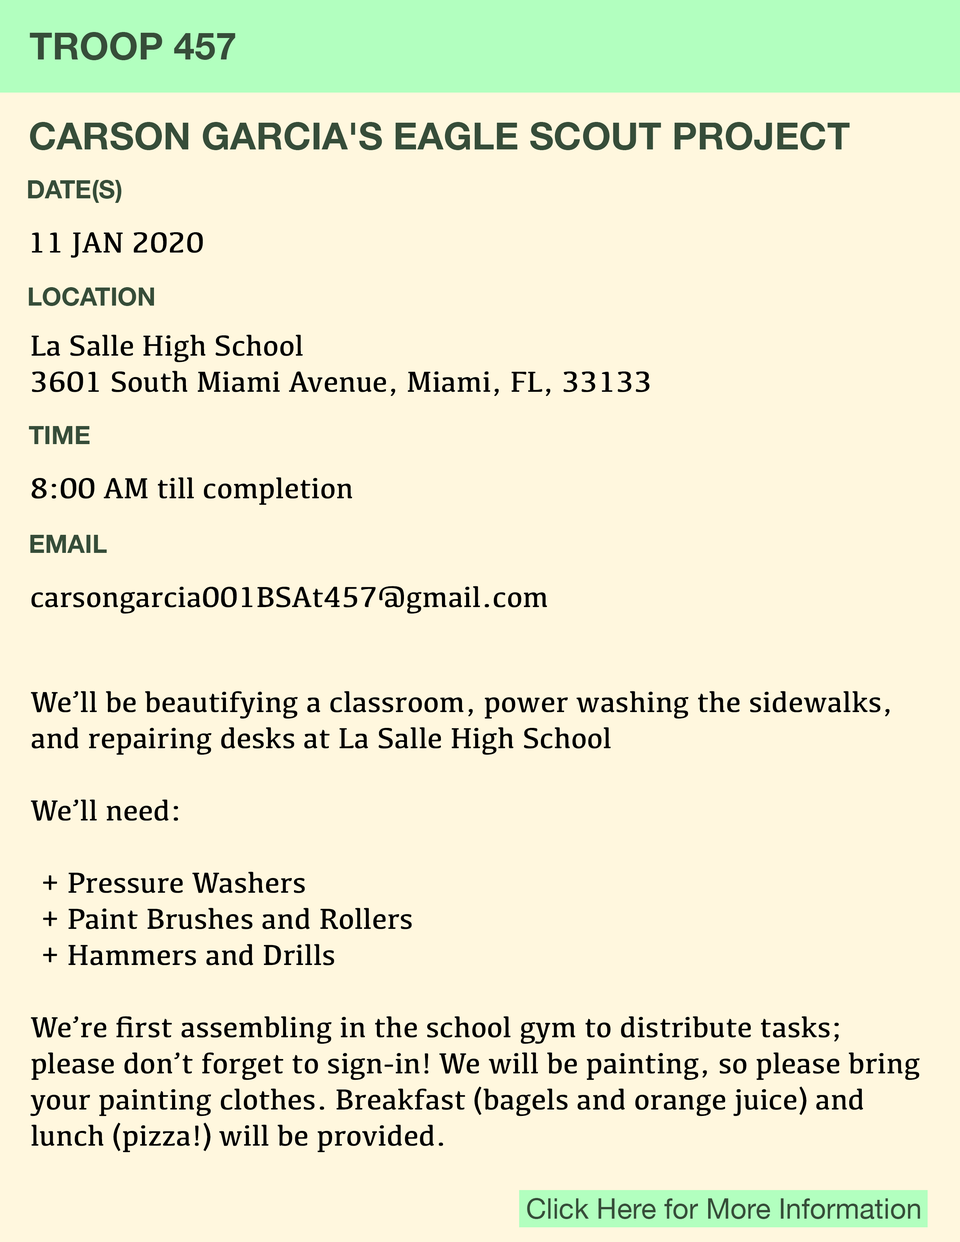
<style>
.page{position:relative;width:960px;height:1242px;background:#fff7de}
.page>*{position:absolute;margin:0}
.t1{font:37.6px "HelveticaNeue-Bold";color:#364d39}
.t2{font:25.1px "HelveticaNeue-Bold";color:#364d39}
.t3{font:30.1px "Kefa-Regular";color:#000000}
</style>
<div class="page">
<p class="t1" style="left:30px;top:32px;width:205px;height:28px">TROOP 457</p>
<p class="t1" style="left:30px;top:122px;width:820px;height:28px">CARSON GARCIA'S EAGLE SCOUT PROJECT</p>
<p class="t2" style="left:28px;top:180px;width:94px;height:23px">DATE(S)</p>
<p class="t3" style="left:32px;top:232px;width:171px;height:26px">11 JAN 2020</p>
<p class="t2" style="left:29px;top:287px;width:125px;height:19px">LOCATION</p>
<p class="t3" style="left:32px;top:335px;width:617px;height:61px">La Salle High School<br>3601 South Miami Avenue, Miami, FL, 33133</p>
<p class="t2" style="left:29px;top:426px;width:61px;height:18px">TIME</p>
<p class="t3" style="left:32px;top:477px;width:320px;height:28px">8:00 AM till completion</p>
<p class="t2" style="left:30px;top:535px;width:77px;height:18px">EMAIL</p>
<p class="t3" style="left:31px;top:586px;width:516px;height:28px">carsongarcia001BSAt457@gmail.com</p>
<p class="t3" style="left:30px;top:691px;width:890px;height:462px">We’ll be beautifying a classroom, power washing the sidewalks,<br>and repairing desks at La Salle High School<br><br>We’ll need:<br><br> + Pressure Washers<br> + Paint Brushes and Rollers<br> + Hammers and Drills<br><br>We’re first assembling in the school gym to distribute tasks;<br>please don’t forget to sign-in! We will be painting, so please bring <br>your painting clothes. Breakfast (bagels and orange juice) and<br>lunch (pizza!) will be provided.</p>
</div>
